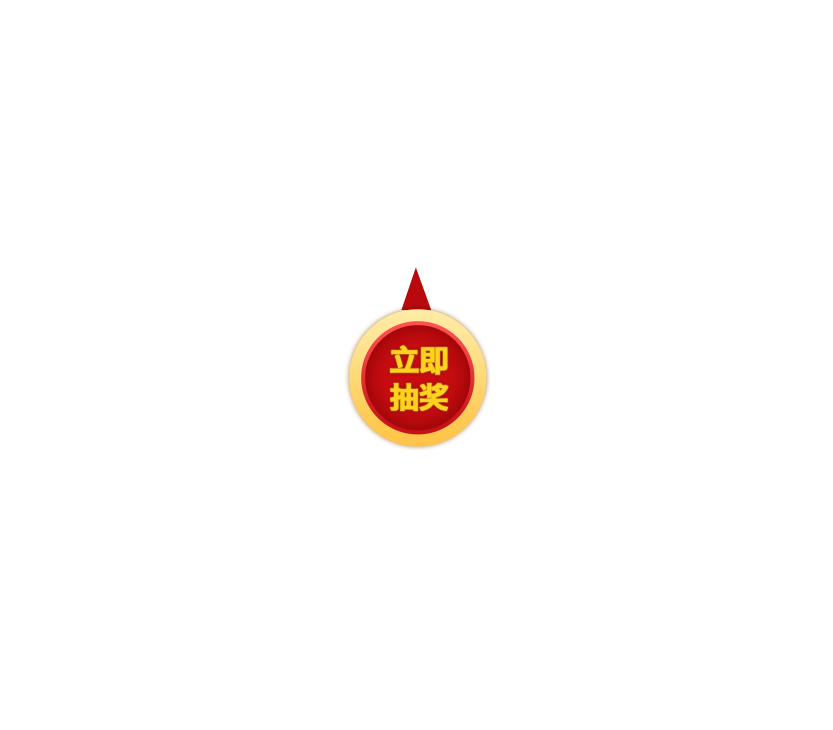
<style>
.page{position:relative;width:833px;height:730px;background:#ffffff}
.page>*{position:absolute;margin:0}
.t1{font:29.8px/37.3px "HiraginoSansGB-W6";letter-spacing:-0.025em;color:#fed221;font-weight:bold}
</style>
<div class="page">
<p class="t1" style="left:390px;top:345px;width:59px;height:66px;text-align:center">立即<br>抽奖</p>
</div>
